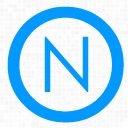
<style>
.page{position:relative;width:128px;height:128px;background:#0099ff}
.page>*{position:absolute;margin:0}
.t1{font:153.3px "CenturyGothic";color:#0099ff}
.t2{font:76.6px "CenturyGothic";color:#0099ff}
</style>
<div class="page">
<p class="t1" style="left:7px;top:6px;width:117px;height:117px">O</p>
<p class="t2" style="left:44px;top:36px;width:45px;height:56px">N</p>
</div>
